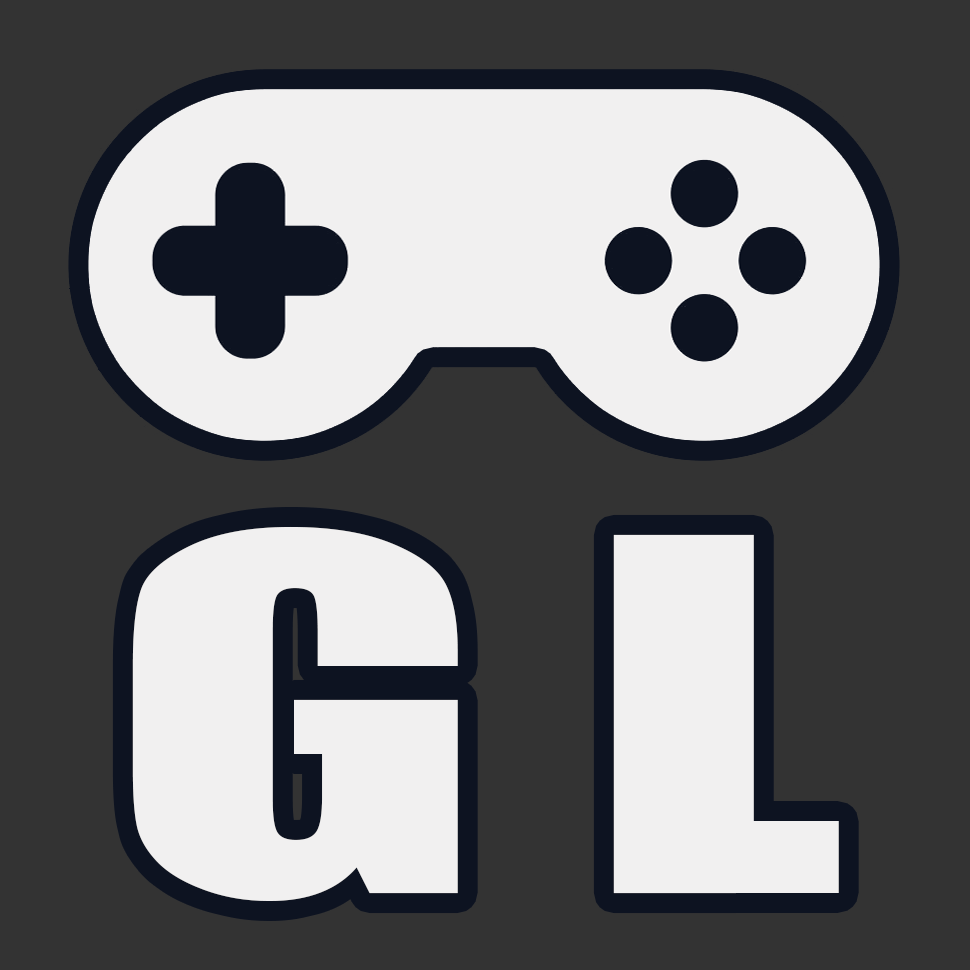
<style>
.page{position:relative;width:970px;height:970px;background:#333333}
.page>*{position:absolute;margin:0}
.t1{font:453.3px "Impact";letter-spacing:0.15em;color:#f1f0f0;scale:1.5 1}
</style>
<div class="page">
<p class="t1" style="left:132px;top:526px;width:707px;height:375px">GL</p>
</div>
